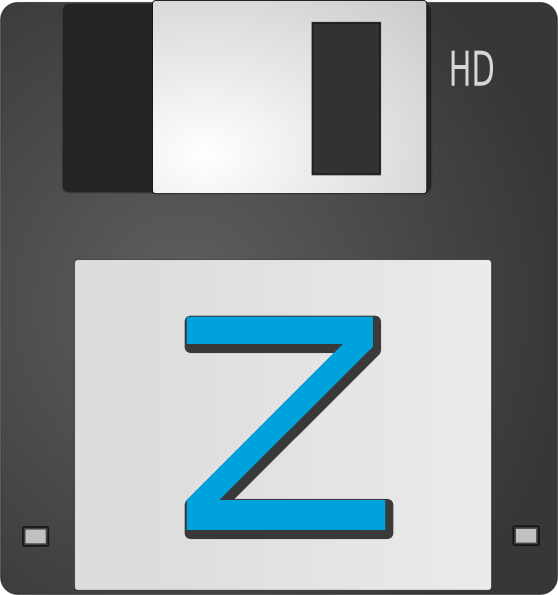
<style>
.page{position:relative;width:558px;height:595px}
.page>*{position:absolute;margin:0}
.t1{font:309.6px "Xperia";color:#00a2de}
</style>
<div class="page">
<p class="t1" style="left:186px;top:316px;width:200px;height:214px">z</p>
</div>
